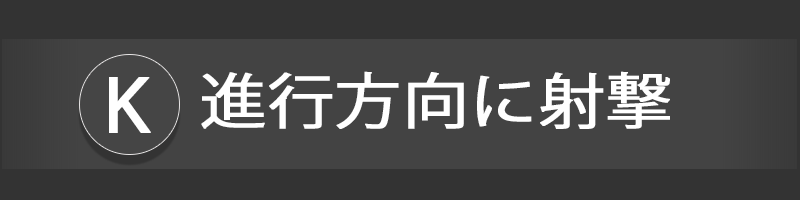
<style>
.page{position:relative;width:800px;height:200px;background:#434343}
.page>*{position:absolute;margin:0}
.t1{font:72px "KozGoPr6N-Regular";color:#ffffff;font-weight:bold;scale:1.1 1}
.t2{font:60px "KozGoPr6N-Regular";color:#ffffff;font-weight:bold;scale:1.1 1}
</style>
<div class="page">
<p class="t1" style="left:109px;top:77px;width:42px;height:56px">K</p>
<p class="t2" style="left:201px;top:71px;width:469px;height:58px">進行方向に射撃</p>
</div>
